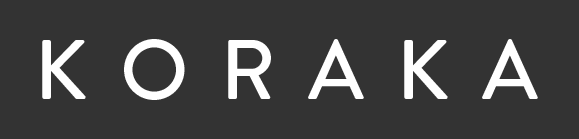
<style>
.page{position:relative;width:579px;height:139px;background:#333333}
.page>*{position:absolute;margin:0}
.t1{font:84.3px "BrandonGrotesque-Medium";letter-spacing:-0.02em;color:#ffffff}
</style>
<div class="page">
<p class="t1" style="left:42px;top:39px;width:496px;height:61px">K  O  R  A  K  A</p>
</div>
